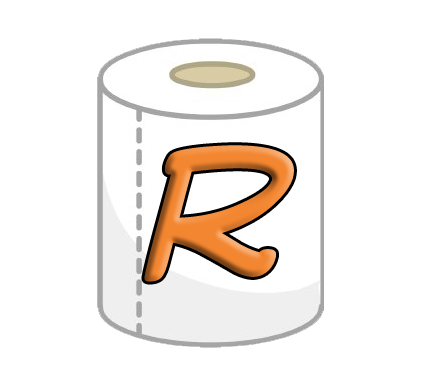
<style>
.page{position:relative;width:425px;height:388px;background:#ffffff}
.page>*{position:absolute;margin:0}
.t1{font:200px "WebLettererProBB-Italic"}
</style>
<div class="page">
<p class="t1" style="left:144px;top:145px;width:150px;height:137px">R</p>
</div>
